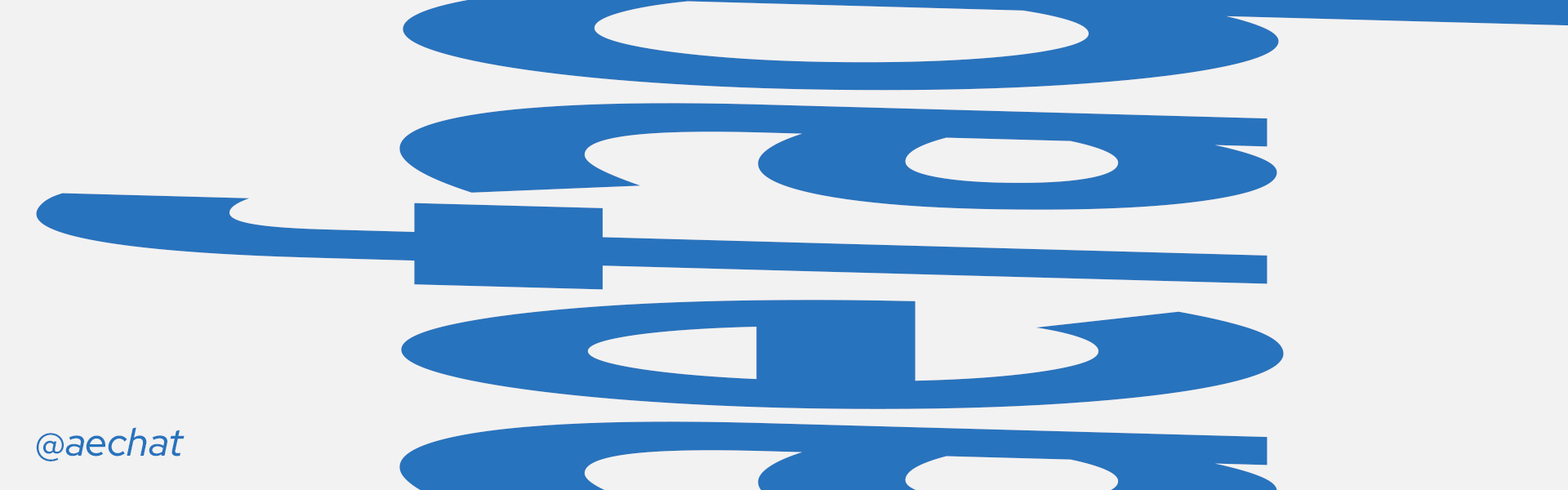
<style>
.page{position:relative;width:1568px;height:490px;background:#f2f2f2}
.page>*{position:absolute;margin:0}
.t1{font:39.2px "RedHatDisplayItalic-MediumItalic";color:#2873bd}
</style>
<div class="page">
<p class="t1" style="left:36px;top:427px;width:149px;height:34px">@aechat</p>
</div>
